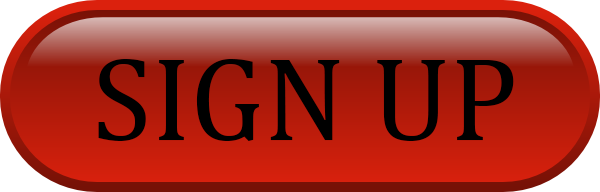
<style>
.page{position:relative;width:600px;height:192px}
.page>*{position:absolute;margin:0}
.t1{font:120.1px "Cambria";color:#000000}
</style>
<div class="page">
<p class="t1" style="left:98px;top:59px;width:416px;height:82px">SIGN UP</p>
</div>
